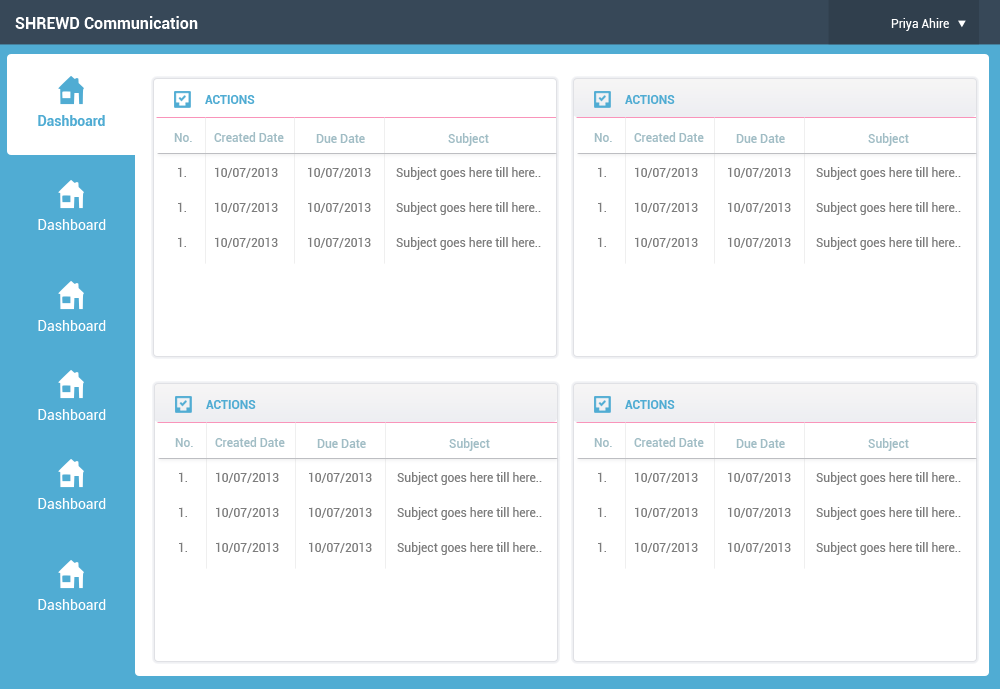
<style>
.page{position:relative;width:1000px;height:689px;background:#ffffff}
.page>*{position:absolute;margin:0}
.t1{font:16px "Roboto-Bold";color:#ffffff}
.t2{font:12px "Roboto-Regular";color:#ffffff}
.t3{font:12px "Roboto-Bold";color:#50acd3}
.t4{font:12px "Roboto-Medium";color:#a1bdc5}
.t5{font:12px "Roboto-Regular";color:#7c7c7c}
.t6{font:14px "Roboto-Regular";color:#ffffff}
</style>
<div class="page">
<p class="t1" style="left:15px;top:16px;width:183px;height:13px">SHREWD Communication</p>
<p class="t2" style="left:891px;top:18px;width:58px;height:13px">Priya Ahire</p>
<p class="t3" style="left:205px;top:95px;width:50px;height:9px">ACTIONS</p>
<p class="t3" style="left:625px;top:95px;width:50px;height:9px">ACTIONS</p>
<p class="t4" style="left:174px;top:133px;width:18px;height:9px">No.</p>
<p class="t4" style="left:214px;top:132px;width:70px;height:10px">Created Date</p>
<p class="t4" style="left:316px;top:134px;width:49px;height:9px">Due Date</p>
<p class="t4" style="left:448px;top:133px;width:41px;height:13px">Subject</p>
<p class="t4" style="left:594px;top:133px;width:18px;height:9px">No.</p>
<p class="t4" style="left:634px;top:132px;width:70px;height:10px">Created Date</p>
<p class="t4" style="left:736px;top:134px;width:49px;height:9px">Due Date</p>
<p class="t4" style="left:868px;top:133px;width:41px;height:13px">Subject</p>
<p class="t5" style="left:178px;top:167px;width:8px;height:10px">1.</p>
<p class="t5" style="left:215px;top:167px;width:63px;height:11px">10/07/2013</p>
<p class="t5" style="left:308px;top:167px;width:63px;height:11px">10/07/2013</p>
<p class="t5" style="left:396px;top:167px;width:145px;height:13px">Subject goes here till here..</p>
<p class="t5" style="left:598px;top:167px;width:8px;height:10px">1.</p>
<p class="t5" style="left:635px;top:167px;width:63px;height:11px">10/07/2013</p>
<p class="t5" style="left:728px;top:167px;width:63px;height:11px">10/07/2013</p>
<p class="t5" style="left:816px;top:167px;width:145px;height:13px">Subject goes here till here..</p>
<p class="t5" style="left:178px;top:202px;width:8px;height:10px">1.</p>
<p class="t5" style="left:215px;top:202px;width:63px;height:11px">10/07/2013</p>
<p class="t5" style="left:308px;top:202px;width:63px;height:11px">10/07/2013</p>
<p class="t5" style="left:396px;top:202px;width:145px;height:13px">Subject goes here till here..</p>
<p class="t5" style="left:598px;top:202px;width:8px;height:10px">1.</p>
<p class="t5" style="left:635px;top:202px;width:63px;height:11px">10/07/2013</p>
<p class="t5" style="left:728px;top:202px;width:63px;height:11px">10/07/2013</p>
<p class="t5" style="left:816px;top:202px;width:145px;height:13px">Subject goes here till here..</p>
<p class="t6" style="left:38px;top:219px;width:68px;height:11px">Dashboard</p>
<p class="t5" style="left:178px;top:237px;width:8px;height:10px">1.</p>
<p class="t5" style="left:215px;top:237px;width:63px;height:11px">10/07/2013</p>
<p class="t5" style="left:308px;top:237px;width:63px;height:11px">10/07/2013</p>
<p class="t5" style="left:396px;top:237px;width:145px;height:13px">Subject goes here till here..</p>
<p class="t5" style="left:598px;top:237px;width:8px;height:10px">1.</p>
<p class="t5" style="left:635px;top:237px;width:63px;height:11px">10/07/2013</p>
<p class="t5" style="left:728px;top:237px;width:63px;height:11px">10/07/2013</p>
<p class="t5" style="left:816px;top:237px;width:145px;height:13px">Subject goes here till here..</p>
<p class="t6" style="left:38px;top:320px;width:68px;height:11px">Dashboard</p>
<p class="t3" style="left:206px;top:400px;width:50px;height:9px">ACTIONS</p>
<p class="t3" style="left:625px;top:400px;width:50px;height:9px">ACTIONS</p>
<p class="t6" style="left:38px;top:409px;width:68px;height:11px">Dashboard</p>
<p class="t4" style="left:175px;top:438px;width:18px;height:9px">No.</p>
<p class="t4" style="left:215px;top:437px;width:70px;height:10px">Created Date</p>
<p class="t4" style="left:449px;top:438px;width:41px;height:13px">Subject</p>
<p class="t4" style="left:594px;top:438px;width:18px;height:9px">No.</p>
<p class="t4" style="left:634px;top:437px;width:70px;height:10px">Created Date</p>
<p class="t4" style="left:868px;top:438px;width:41px;height:13px">Subject</p>
<p class="t4" style="left:317px;top:439px;width:49px;height:9px">Due Date</p>
<p class="t4" style="left:736px;top:439px;width:49px;height:9px">Due Date</p>
<p class="t5" style="left:179px;top:472px;width:8px;height:10px">1.</p>
<p class="t5" style="left:216px;top:472px;width:63px;height:11px">10/07/2013</p>
<p class="t5" style="left:309px;top:472px;width:63px;height:11px">10/07/2013</p>
<p class="t5" style="left:397px;top:472px;width:145px;height:13px">Subject goes here till here..</p>
<p class="t5" style="left:598px;top:472px;width:8px;height:10px">1.</p>
<p class="t5" style="left:635px;top:472px;width:63px;height:11px">10/07/2013</p>
<p class="t5" style="left:728px;top:472px;width:63px;height:11px">10/07/2013</p>
<p class="t5" style="left:816px;top:472px;width:145px;height:13px">Subject goes here till here..</p>
<p class="t6" style="left:38px;top:498px;width:68px;height:11px">Dashboard</p>
<p class="t5" style="left:179px;top:507px;width:8px;height:10px">1.</p>
<p class="t5" style="left:216px;top:507px;width:63px;height:11px">10/07/2013</p>
<p class="t5" style="left:309px;top:507px;width:63px;height:11px">10/07/2013</p>
<p class="t5" style="left:397px;top:507px;width:145px;height:13px">Subject goes here till here..</p>
<p class="t5" style="left:598px;top:507px;width:8px;height:10px">1.</p>
<p class="t5" style="left:635px;top:507px;width:63px;height:11px">10/07/2013</p>
<p class="t5" style="left:728px;top:507px;width:63px;height:11px">10/07/2013</p>
<p class="t5" style="left:816px;top:507px;width:145px;height:13px">Subject goes here till here..</p>
<p class="t5" style="left:179px;top:542px;width:8px;height:10px">1.</p>
<p class="t5" style="left:216px;top:542px;width:63px;height:11px">10/07/2013</p>
<p class="t5" style="left:309px;top:542px;width:63px;height:11px">10/07/2013</p>
<p class="t5" style="left:397px;top:542px;width:145px;height:13px">Subject goes here till here..</p>
<p class="t5" style="left:598px;top:542px;width:8px;height:10px">1.</p>
<p class="t5" style="left:635px;top:542px;width:63px;height:11px">10/07/2013</p>
<p class="t5" style="left:728px;top:542px;width:63px;height:11px">10/07/2013</p>
<p class="t5" style="left:816px;top:542px;width:145px;height:13px">Subject goes here till here..</p>
<p class="t6" style="left:38px;top:599px;width:68px;height:11px">Dashboard</p>
</div>
